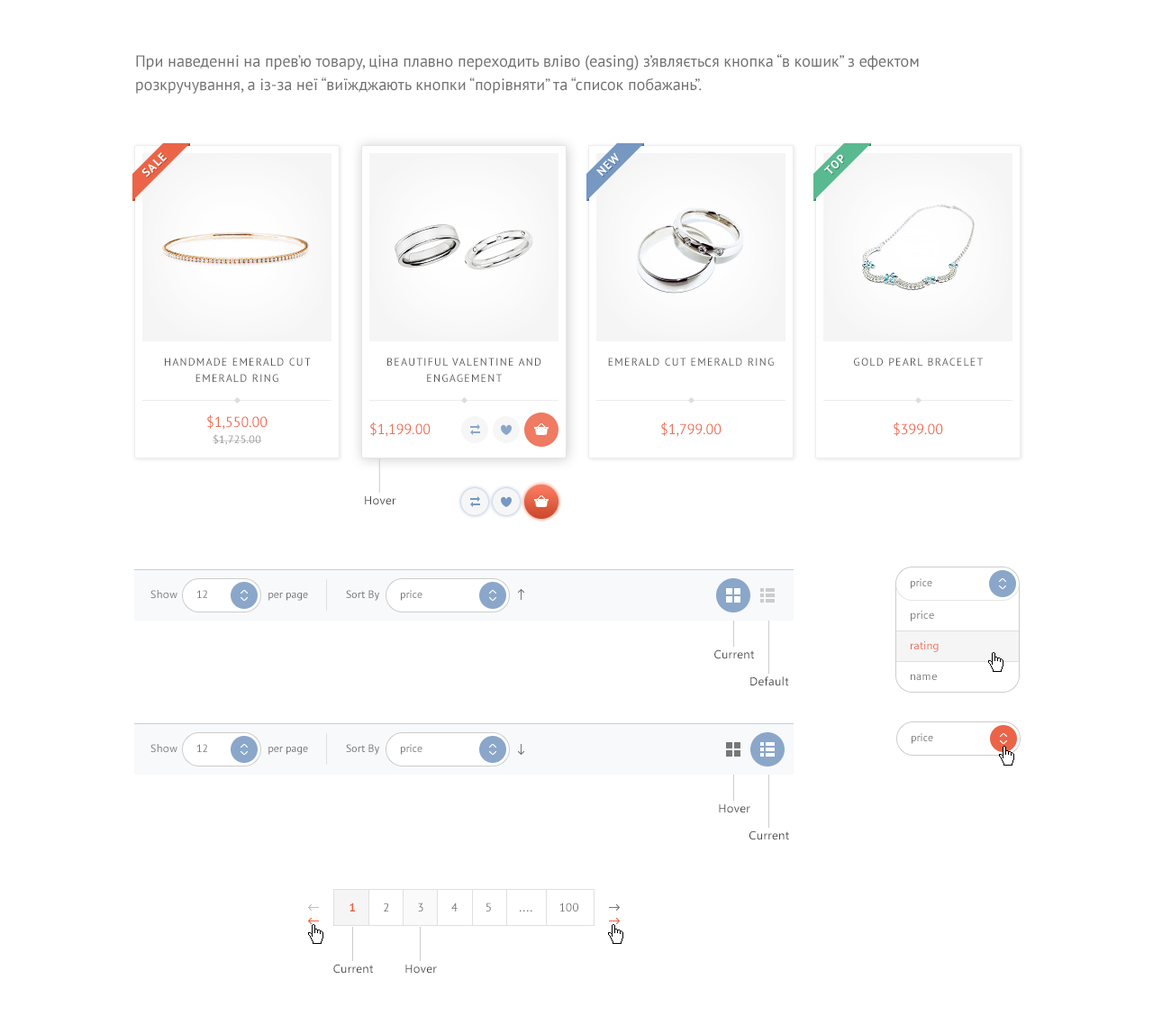
<style>
.page{position:relative;width:1153px;height:1034px;background:#ffffff}
.page>*{position:absolute;margin:0}
.t1{font:16.2px/23.4px "PTSans-Regular";color:#707070}
.t2{font:11.7px "PTSans-Bold";letter-spacing:0.1em;color:#ffffff;text-transform:uppercase}
.t3{font:10.8px/16.2px "PTSans-Regular";letter-spacing:0.1em;color:#555555;text-transform:uppercase}
.t4{font:10.8px "PTSans-Regular";letter-spacing:0.1em;color:#555555;text-transform:uppercase}
.t5{font:14.4px "PTSans-Regular";color:#ec6f54}
.t6{font:10.8px "PTSans-Regular";letter-spacing:0.025em;color:#999999}
.t7{font:11.7px "SegoeUI";letter-spacing:0.025em;color:#444444}
.t8{font:10.8px "PTSans-Regular";color:#777777}
.t9{font:10.8px "SegoeUI";letter-spacing:0.025em;color:#777777}
.t10{font:10.8px "PTSans-Regular";color:#707070}
.t11{font:10.8px "SegoeUI";letter-spacing:0.025em;color:#eb6447}
.t12{font:11.7px "PTSans-Regular";letter-spacing:0.025em;color:#707070}
.t13{font:11.7px "PTSans-Bold";letter-spacing:0.025em;color:#eb6447}
</style>
<div class="page">
<p class="t1" style="left:136px;top:54px;width:783px;height:40px">При наведенні на прев’ю товару, ціна плавно переходить вліво (easing) з’являється кнопка “в кошик” з ефектом розкручування, а із-за неї “виїжджають кнопки “порівняти” та “список побажань”.</p>
<p class="t2" style="left:141px;top:152px;width:26px;height:25px;rotate:-45deg">sale</p>
<p class="t2" style="left:596px;top:152px;width:23px;height:25px;rotate:-45deg">New</p>
<p class="t2" style="left:823px;top:154px;width:20px;height:20px;rotate:-45deg">Top</p>
<p class="t3" style="left:165px;top:358px;width:146px;height:24px;text-align:center">handmade Emerald Cut Emerald Ring</p>
<p class="t3" style="left:387px;top:358px;width:154px;height:24px;text-align:center">beautiful Valentine And Engagement</p>
<p class="t4" style="left:608px;top:358px;width:166px;height:8px">Emerald Cut Emerald Ring</p>
<p class="t4" style="left:854px;top:358px;width:129px;height:8px">Gold Pearl Bracelet</p>
<p class="t5" style="left:207px;top:415px;width:61px;height:15px">$1,550.00</p>
<p class="t5" style="left:370px;top:422px;width:61px;height:15px">$1,199.00</p>
<p class="t5" style="left:661px;top:422px;width:61px;height:15px">$1,799.00</p>
<p class="t5" style="left:894px;top:422px;width:49px;height:14px">$399.00</p>
<p class="t6" style="left:213px;top:434px;width:49px;height:11px">$1,725.00</p>
<p class="t7" style="left:365px;top:496px;width:31px;height:9px">Hover</p>
<p class="t8" style="left:911px;top:578px;width:21px;height:11px">price</p>
<p class="t9" style="left:150px;top:590px;width:27px;height:9px">Show</p>
<p class="t8" style="left:196px;top:590px;width:11px;height:8px">12</p>
<p class="t10" style="left:268px;top:593px;width:40px;height:8px">per page</p>
<p class="t10" style="left:346px;top:590px;width:33px;height:11px">Sort By</p>
<p class="t8" style="left:401px;top:590px;width:21px;height:11px">price</p>
<p class="t9" style="left:911px;top:611px;width:23px;height:11px">price</p>
<p class="t11" style="left:911px;top:641px;width:28px;height:11px">rating</p>
<p class="t7" style="left:714px;top:649px;width:40px;height:10px">Current</p>
<p class="t7" style="left:750px;top:677px;width:39px;height:9px">Default</p>
<p class="t9" style="left:911px;top:674px;width:26px;height:6px">name</p>
<p class="t8" style="left:912px;top:733px;width:21px;height:11px">price</p>
<p class="t9" style="left:150px;top:744px;width:27px;height:9px">Show</p>
<p class="t8" style="left:196px;top:744px;width:11px;height:8px">12</p>
<p class="t10" style="left:268px;top:747px;width:40px;height:8px">per page</p>
<p class="t10" style="left:346px;top:744px;width:33px;height:11px">Sort By</p>
<p class="t8" style="left:401px;top:744px;width:21px;height:11px">price</p>
<p class="t7" style="left:719px;top:804px;width:31px;height:9px">Hover</p>
<p class="t7" style="left:749px;top:831px;width:40px;height:9px">Current</p>
<p class="t12" style="left:350px;top:903px;width:228px;height:9px"><span class="t13">1        </span>2        3        4        5        ....        100</p>
<p class="t7" style="left:333px;top:964px;width:40px;height:10px">Current</p>
<p class="t7" style="left:405px;top:965px;width:32px;height:9px">Hover</p>
</div>
